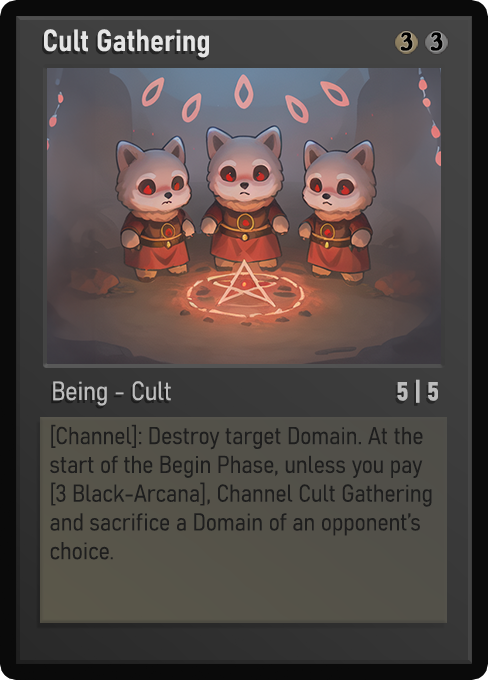
<style>
.page{position:relative;width:488px;height:680px}
.page>*{position:absolute;margin:0}
.t1{font:30px "Bahnschrift-SemiBoldSemiCondensed";color:#f2f2f2;font-weight:bold}
.t2{font:25px "WTRRoycroft";color:#000000;font-weight:bold;scale:1.09 1}
.t3{font:26px "Bahnschrift-LightSemiCondensed";color:#c8c8c8;font-weight:bold}
.t4{font:26px "Bahnschrift-BoldSemiCondensed";color:#bdbdbd;font-weight:bold}
.t5{font:24px "Bahnschrift-LightSemiCondensed";color:#1e1e1e;font-weight:bold}
</style>
<div class="page">
<p class="t1" style="left:44px;top:29px;width:165px;height:29px;opacity:0.9">Cult Gathering</p>
<p class="t2" style="left:400px;top:32px;width:13px;height:19px">3</p>
<p class="t2" style="left:430px;top:32px;width:13px;height:19px">3</p>
<p class="t3" style="left:53px;top:381px;width:118px;height:25px;opacity:0.9">Being - Cult</p>
<p class="t4" style="left:397px;top:379px;width:41px;height:24px">5 | 5</p>
<p class="t5" style="left:50px;top:424px;width:382px;height:136px">[Channel]: Destroy target Domain. At the start of the Begin Phase, unless you pay [3 Black-Arcana], Channel Cult Gathering and sacrifice a Domain of an opponent’s choice.</p>
</div>
